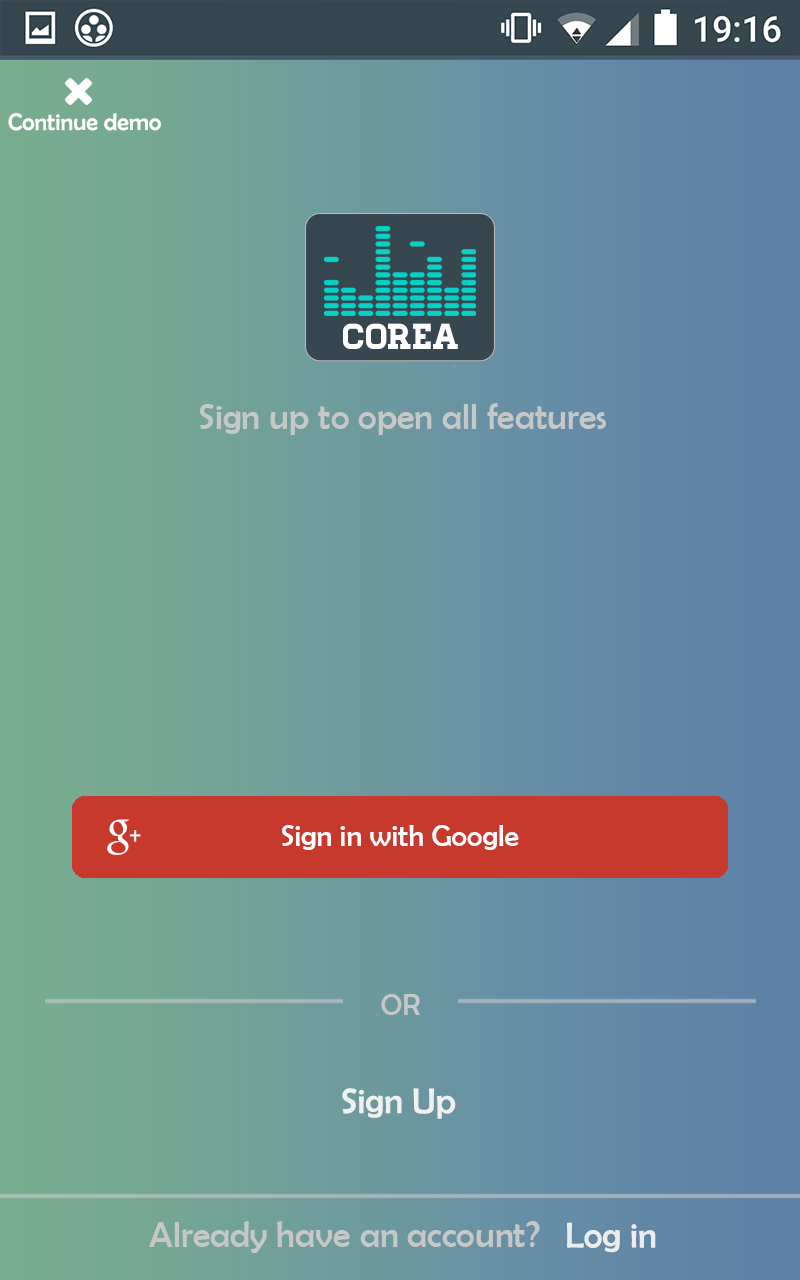
<style>
.page{position:relative;width:800px;height:1280px}
.page>*{position:absolute;margin:0}
.t1{font:24px "BerlinSansFB-Reg";color:#ffffff}
.t2{font:36px "Homestead-Regular";color:#ffffff}
.t3{font:36px "BerlinSansFB-Reg";color:#c6c8c8}
.t4{font:30px "BerlinSansFB-Reg";color:#ffffff}
.t5{font:30px "BerlinSansFB-Reg";color:#c6c8c8}
.t6{font:36px "BerlinSansFB-Reg";color:#f0f0f0}
.t7{font:36px "BerlinSansFB-Reg";color:#eeeded}
</style>
<div class="page">
<p class="t1" style="left:8px;top:113px;width:153px;height:18px">Continue demo</p>
<p class="t2" style="left:343px;top:323px;width:115px;height:26px">COREA</p>
<p class="t3" style="left:200px;top:403px;width:406px;height:32px">Sign up to open all features</p>
<p class="t4" style="left:282px;top:825px;width:237px;height:25px">Sign in with Google</p>
<p class="t5" style="left:381px;top:994px;width:39px;height:21px">OR</p>
<p class="t6" style="left:342px;top:1088px;width:114px;height:31px">Sign Up</p>
<p class="t3" style="left:149px;top:1221px;width:391px;height:32px">Already have an account?</p>
<p class="t7" style="left:567px;top:1222px;width:89px;height:31px">Log in</p>
</div>
